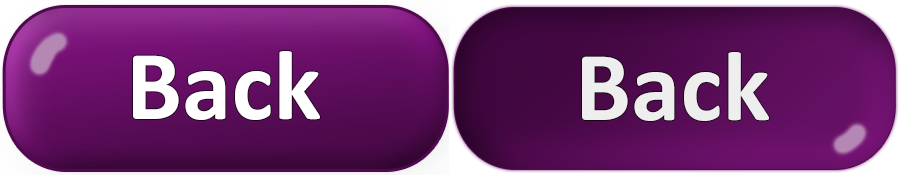
<style>
.page{position:relative;width:900px;height:176px}
.page>*{position:absolute;margin:0}
.t1{font:100px "Calibri-Bold";color:#ffffff}
.t2{font:100px "Calibri-Bold";color:#eeeeee}
</style>
<div class="page">
<p class="t1" style="left:133px;top:51px;width:187px;height:69px">Back</p>
<p class="t2" style="left:582px;top:52px;width:187px;height:69px">Back</p>
</div>
